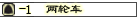
<style>
.page{position:relative;width:140px;height:19px;background:#ffffff}
.page>*{position:absolute;margin:0}
.t1{font:12.8px "LiSu";letter-spacing:-0.075em;color:#161616}
</style>
<div class="page">
<p class="t1" style="left:46px;top:4px;width:37px;height:10px">两轮车</p>
</div>
